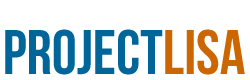
<style>
.page{position:relative;width:250px;height:80px;background:#ffffff}
.page>*{position:absolute;margin:0}
.t1{font:63px "BebasNeue";color:#006699}
.t2{font:63px "BebasNeue";color:#cc6600}
</style>
<div class="page">
<p class="t1" style="left:5px;top:29px;width:240px;height:46px">Project<span class="t2">Lisa</span></p>
</div>
